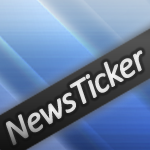
<style>
.page{position:relative;width:150px;height:150px}
.page>*{position:absolute;margin:0}
.t1{font:36px "Calibri-Italic";letter-spacing:-0.05em;color:#dfdfdf;font-weight:bold}
</style>
<div class="page">
<p class="t1" style="left:5px;top:50px;width:138px;height:96px;rotate:-31deg">NewsTicker</p>
</div>
